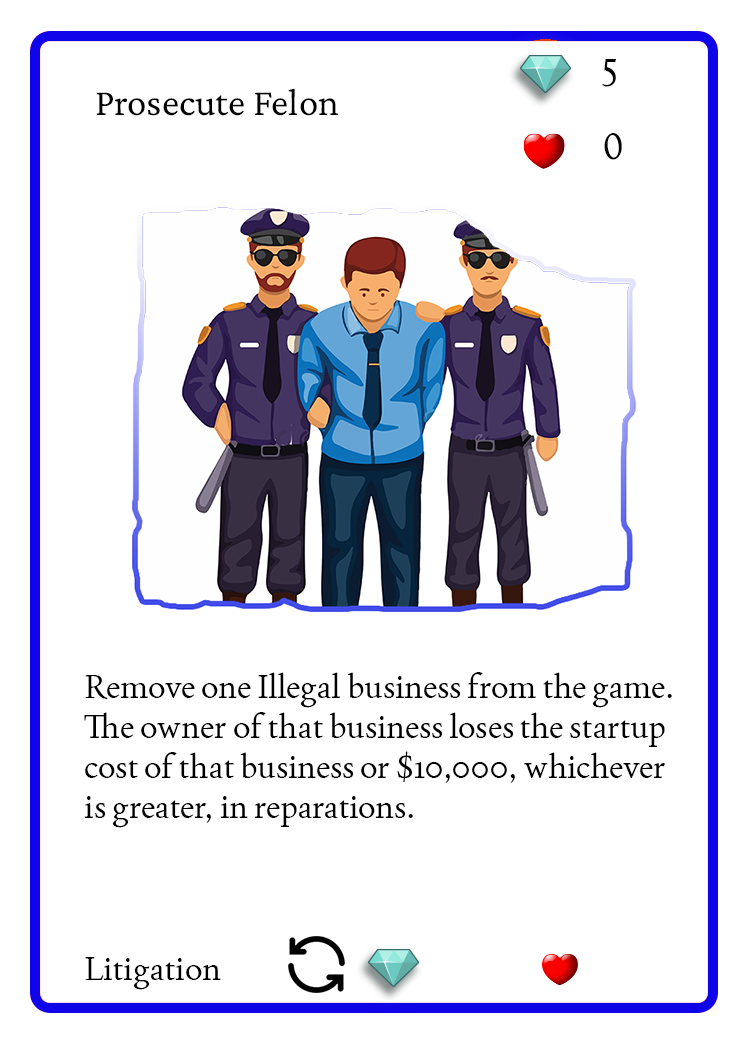
<style>
.page{position:relative;width:750px;height:1050px;background:#ffffff}
.page>*{position:absolute;margin:0}
.t1{font:37.5px "Joan-Regular";color:#000000;text-transform:uppercase}
.t2{font:38.9px "CrimsonPro-Regular";color:#000000}
.t3{font:33.3px "Joan-Regular";color:#000000}
</style>
<div class="page">
<p class="t1" style="left:602px;top:59px;width:14px;height:28px">5</p>
<p class="t2" style="left:96px;top:88px;width:242px;height:28px">Prosecute Felon</p>
<p class="t1" style="left:604px;top:133px;width:18px;height:27px">0</p>
<p class="t3" style="left:84px;top:672px;width:588px;height:156px">Remove one Illegal business from the game. The owner of that business loses the startup cost of that business or $10,000, whichever is greater, in reparations.</p>
<p class="t3" style="left:85px;top:957px;width:136px;height:33px">Litigation</p>
</div>
